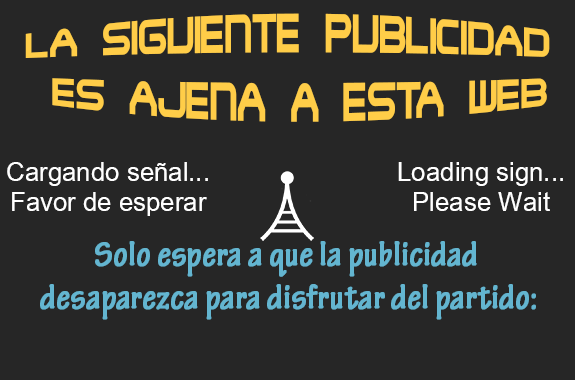
<style>
.page{position:relative;width:575px;height:380px;background:#262626}
.page>*{position:absolute;margin:0}
.t1{font:36px "SteelWolfMedium";color:#ffcd48}
.t2{font:36px/30px "Utsaah";color:#ffffff}
.t3{font:36px "TektonPro-BoldCond";color:#63b5d0;font-weight:bold}
</style>
<div class="page">
<p class="t1" style="left:25px;top:13px;width:525px;height:109px;text-align:center">LA SIGUIENTE PUBLICIDAD <br>ES AJENA A ESTA WEB</p>
<p class="t2" style="left:7px;top:162px;width:201px;height:54px;text-align:center">Cargando señal...<br>Favor de esperar</p>
<p class="t2" style="left:398px;top:162px;width:165px;height:49px;text-align:center">Loading sign...<br>Please Wait</p>
<p class="t3" style="left:40px;top:241px;width:496px;height:79px;text-align:center">Solo espera a que la publicidad <br>desaparezca para disfrutar del partido:</p>
</div>
